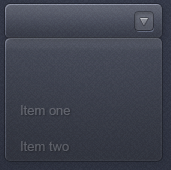
<style>
.page{position:relative;width:171px;height:170px}
.page>*{position:absolute;margin:0}
.t1{font:13px/36px "ArialMT";color:#5f6169}
</style>
<div class="page">
<p class="t1" style="left:21px;top:105px;width:49px;height:46px">Item one<br>Item two</p>
</div>
